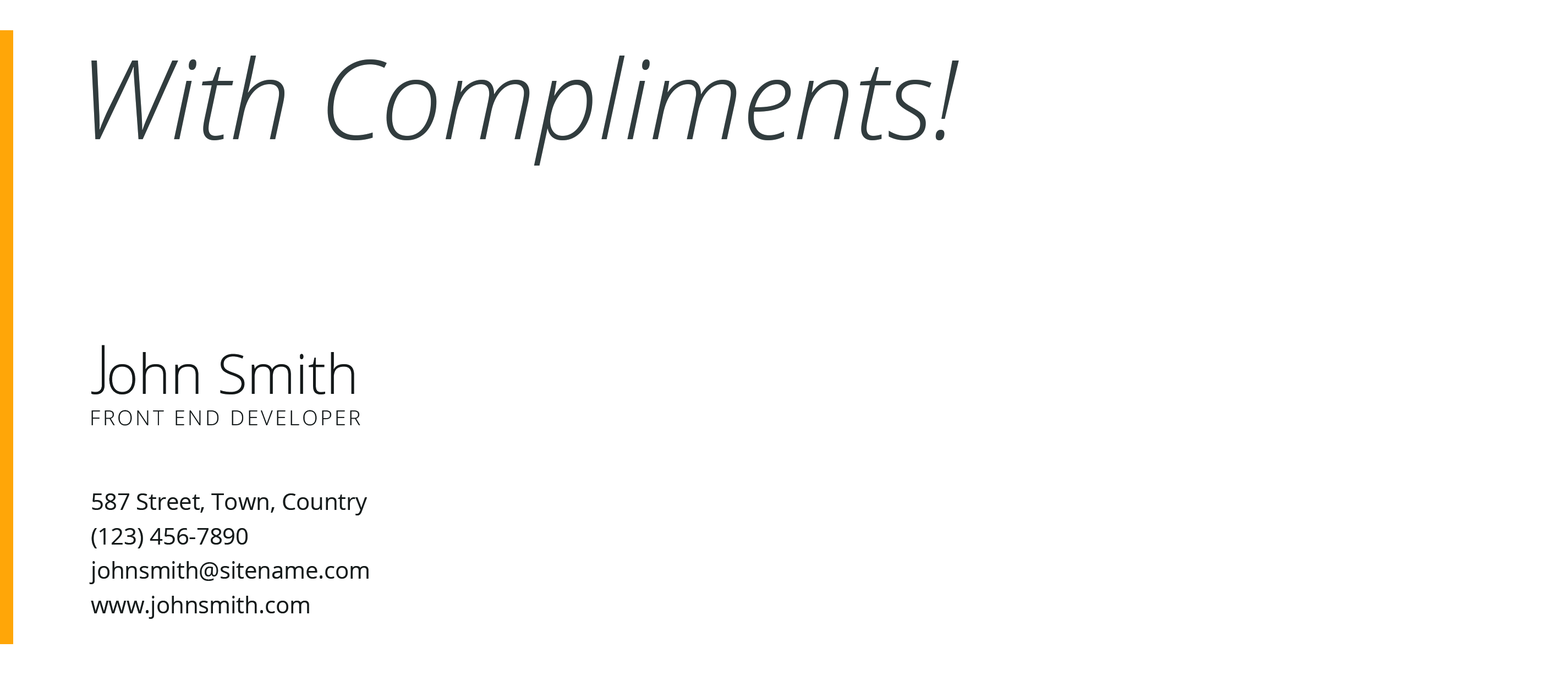
<style>
.page{position:relative;width:1568px;height:681px;background:#ffffff}
.page>*{position:absolute;margin:0}
.t1{font:110px "OpenSansLight-Italic";color:#313c3e}
.t2{font:55px "OpenSans-Light";color:#141819}
.t3{font:20.6px "OpenSans-Light";letter-spacing:0.118em;color:#141819}
.t4{font:22.9px/34.4px "OpenSans";color:#161b1b}
</style>
<div class="page">
<p class="t1" style="left:91px;top:56px;width:868px;height:110px">With Compliments!</p>
<p class="t2" style="left:91px;top:345px;width:14px;height:49px">J</p>
<p class="t2" style="left:109px;top:352px;width:245px;height:42px">ohn Smith</p>
<p class="t3" style="left:91px;top:410px;width:269px;height:16px">FRONT END DEVELOPER</p>
<p class="t4" style="left:89px;top:494px;width:280px;height:125px">587 Street, Town, Country<br>(123) 456-7890<br>johnsmith@sitename.com<br>www.johnsmith.com</p>
</div>
